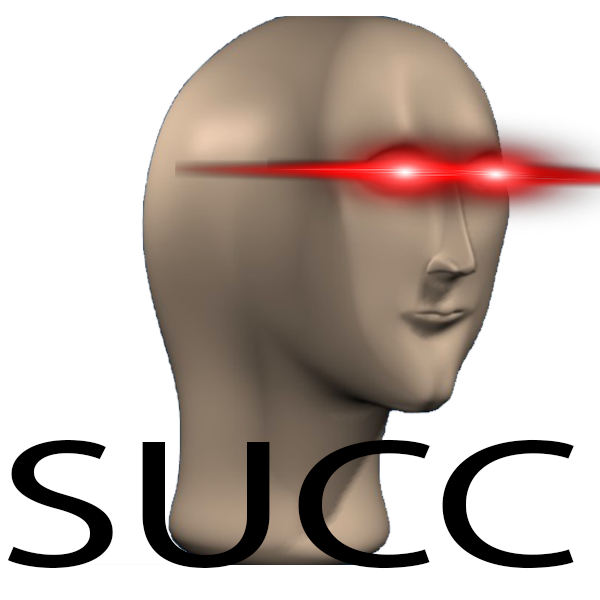
<style>
.page{position:relative;width:600px;height:600px;background:#ffffff}
.page>*{position:absolute;margin:0}
.t1{font:183.3px "MyriadPro-Regular";color:#010000;scale:1.4 1}
</style>
<div class="page">
<p class="t1" style="left:7px;top:439px;width:567px;height:130px">SUCC</p>
</div>
